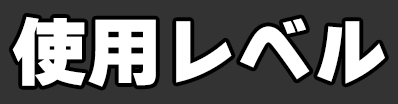
<style>
.page{position:relative;width:398px;height:104px;background:#333333}
.page>*{position:absolute;margin:0}
.t1{font:75px "WanpakuRuika-08";color:#ffffff}
</style>
<div class="page">
<p class="t1" style="left:12px;top:16px;width:373px;height:71px">使用レベル</p>
</div>
